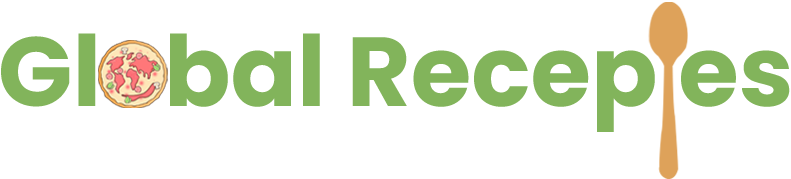
<style>
.page{position:relative;width:791px;height:179px;background:#ffffff}
.page>*{position:absolute;margin:0}
.t1{font:98.1px "Poppins-Bold";color:#82b45b}
</style>
<div class="page">
<p class="t1" style="left:1px;top:33px;width:789px;height:99px">Global Recep es</p>
</div>
